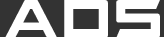
<style>
.page{position:relative;width:164px;height:37px;background:#ffffff}
.page>*{position:absolute;margin:0}
.t1{font:59.3px "QORE";color:#ffffff}
</style>
<div class="page">
<p class="t1" style="left:5px;top:0px;width:155px;height:38px">ADS</p>
</div>
